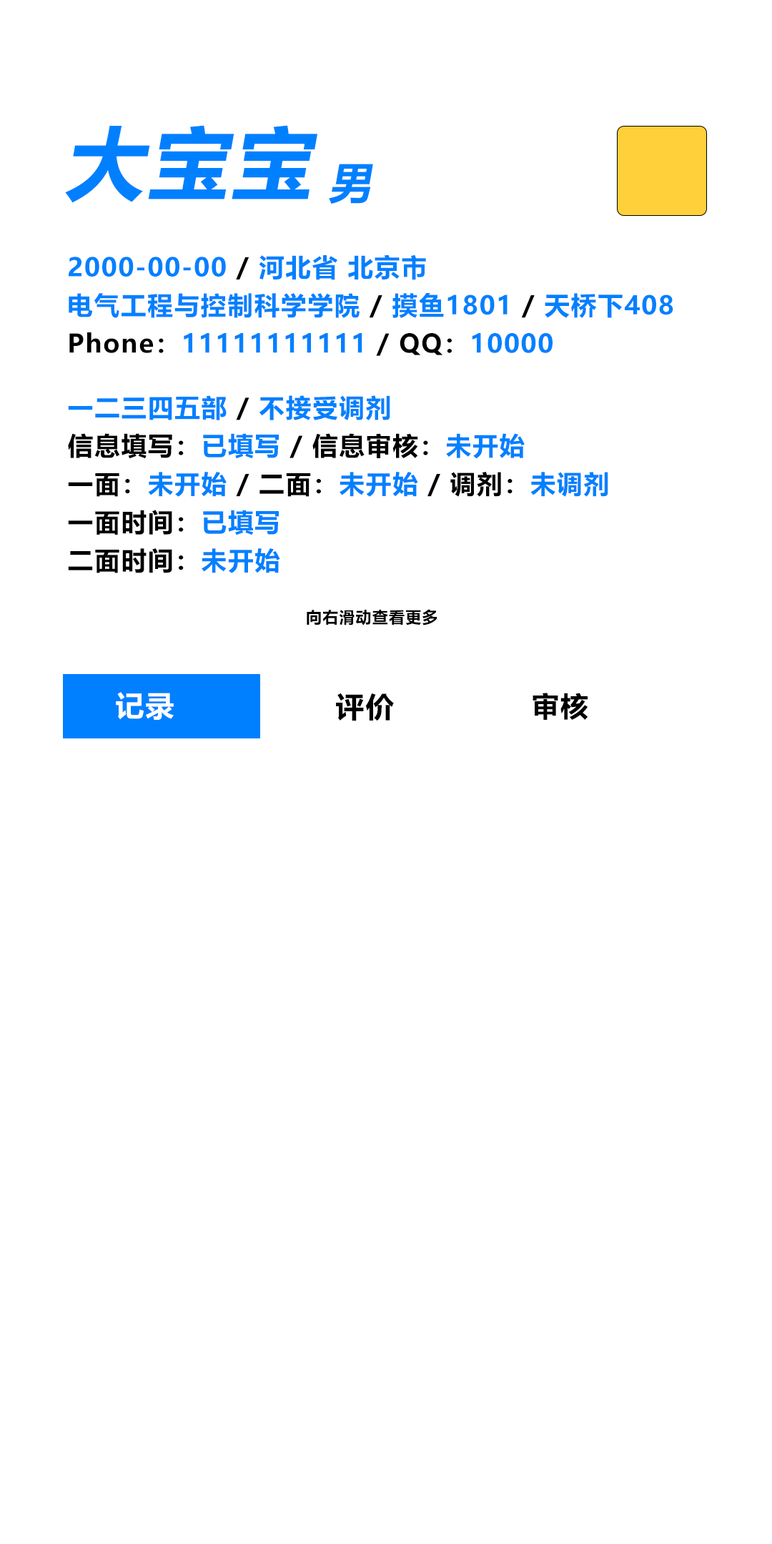
<style>
.page{position:relative;width:772px;height:1544px;background:#ffffff}
.page>*{position:absolute;margin:0}
.t1{font:79.5px "MicrosoftYaHei-Bold";letter-spacing:0.05em;color:#0080ff;font-style:italic}
.t2{font:42.5px "MicrosoftYaHei-Bold";letter-spacing:0.05em;color:#0080ff;font-style:italic}
.t3{font:25.4px/38.2px "MicrosoftYaHei-Bold";letter-spacing:0.05em;color:#0080ff}
.t4{font:25.4px/38.2px "MicrosoftYaHei-Bold";letter-spacing:0.05em;color:#000000}
.t5{font:15.8px "MicrosoftYaHei-Bold";letter-spacing:0.05em;color:#000000}
.t6{font:28.6px "MicrosoftYaHei-Bold";letter-spacing:0.05em;color:#ffffff}
.t7{font:28.6px "MicrosoftYaHei-Bold";letter-spacing:0.05em;color:#000000}
.t8{font:27.7px "MicrosoftYaHei-Bold";letter-spacing:0.05em;color:#000000}
</style>
<div class="page">
<p class="t1" style="left:65px;top:125px;width:252px;height:78px">大宝宝</p>
<p class="t2" style="left:329px;top:164px;width:44px;height:40px">男</p>
<p class="t3" style="left:69px;top:255px;width:604px;height:101px">2000-00-00<span class="t4"> / </span>河北省 北京市<br>电气工程与控制科学学院<span class="t4"> / </span>摸鱼1801<span class="t4"> / </span>天桥下408<br><span class="t4">Phone：</span>11111111111<span class="t4"> / QQ：</span>10000</p>
<p class="t4" style="left:68px;top:395px;width:540px;height:178px"><span class="t3">一二三四五部</span> / <span class="t3">不接受调剂<br></span>信息填写：<span class="t3">已填写</span> / 信息审核：<span class="t3">未开始<br></span>一面：<span class="t3">未开始</span> / 二面：<span class="t3">未开始</span> / 调剂：<span class="t3">未调剂<br></span>一面时间：<span class="t3">已填写<br></span>二面时间：<span class="t3">未开始</span></p>
<p class="t5" style="left:307px;top:609px;width:131px;height:17px">向右滑动查看更多</p>
<p class="t6" style="left:116px;top:692px;width:58px;height:28px">记录</p>
<p class="t7" style="left:336px;top:693px;width:58px;height:28px">评价</p>
<p class="t8" style="left:533px;top:693px;width:55px;height:27px">审核</p>
</div>
